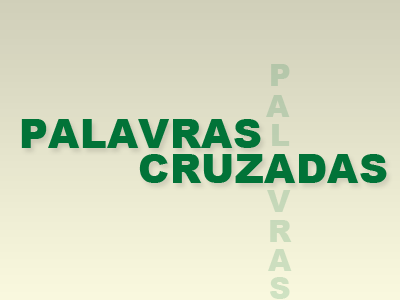
<style>
.page{position:relative;width:400px;height:300px}
.page>*{position:absolute;margin:0}
.t1{font:40px "Arial-Black";letter-spacing:0.01em;color:#017338}
</style>
<div class="page">
<p class="t1" style="left:21px;top:119px;width:240px;height:29px">PALAVRAS</p>
<p class="t1" style="left:139px;top:154px;width:248px;height:29px">CRUZADAS</p>
</div>
